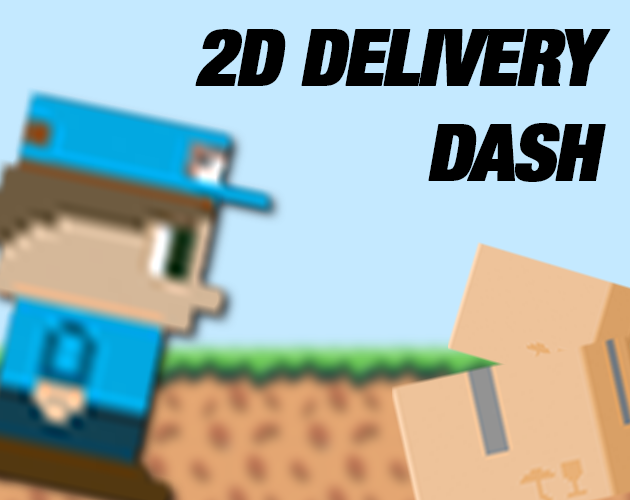
<style>
.page{position:relative;width:630px;height:500px;background:#c4e9ff}
.page>*{position:absolute;margin:0}
.t1{font:78.6px "HelveticaNeueLTPro-BlkCn";letter-spacing:-0.04em;color:#000000;font-weight:bold;font-style:italic}
</style>
<div class="page">
<p class="t1" style="left:195px;top:29px;width:416px;height:153px;text-align:justify">2D DELIVERY <br>DASH</p>
</div>
